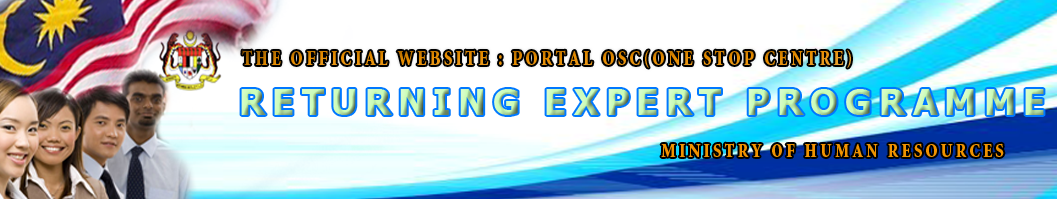
<style>
.page{position:relative;width:1057px;height:199px;background:#ffffff}
.page>*{position:absolute;margin:0}
.t1{font:20.7px "MinionStd-Black";letter-spacing:0.2em;scale:0.8 1}
.t2{font:36px "Tahoma-Bold";letter-spacing:0.2em}
.t3{font:19.5px "MinionStd-Black";letter-spacing:0.2em;color:#f09300;scale:0.83 1}
</style>
<div class="page">
<p class="t1" style="left:242px;top:50px;width:609px;height:18px">THE OFFICIAL WEBSITE : PORTAL OSC(ONE STOP CENTRE)</p>
<p class="t2" style="left:241px;top:89px;width:803px;height:26px">RETURNING EXPERT PROGRAMME</p>
<p class="t3" style="left:661px;top:143px;width:343px;height:14px">MINISTRY OF HUMAN RESOURCES</p>
</div>
